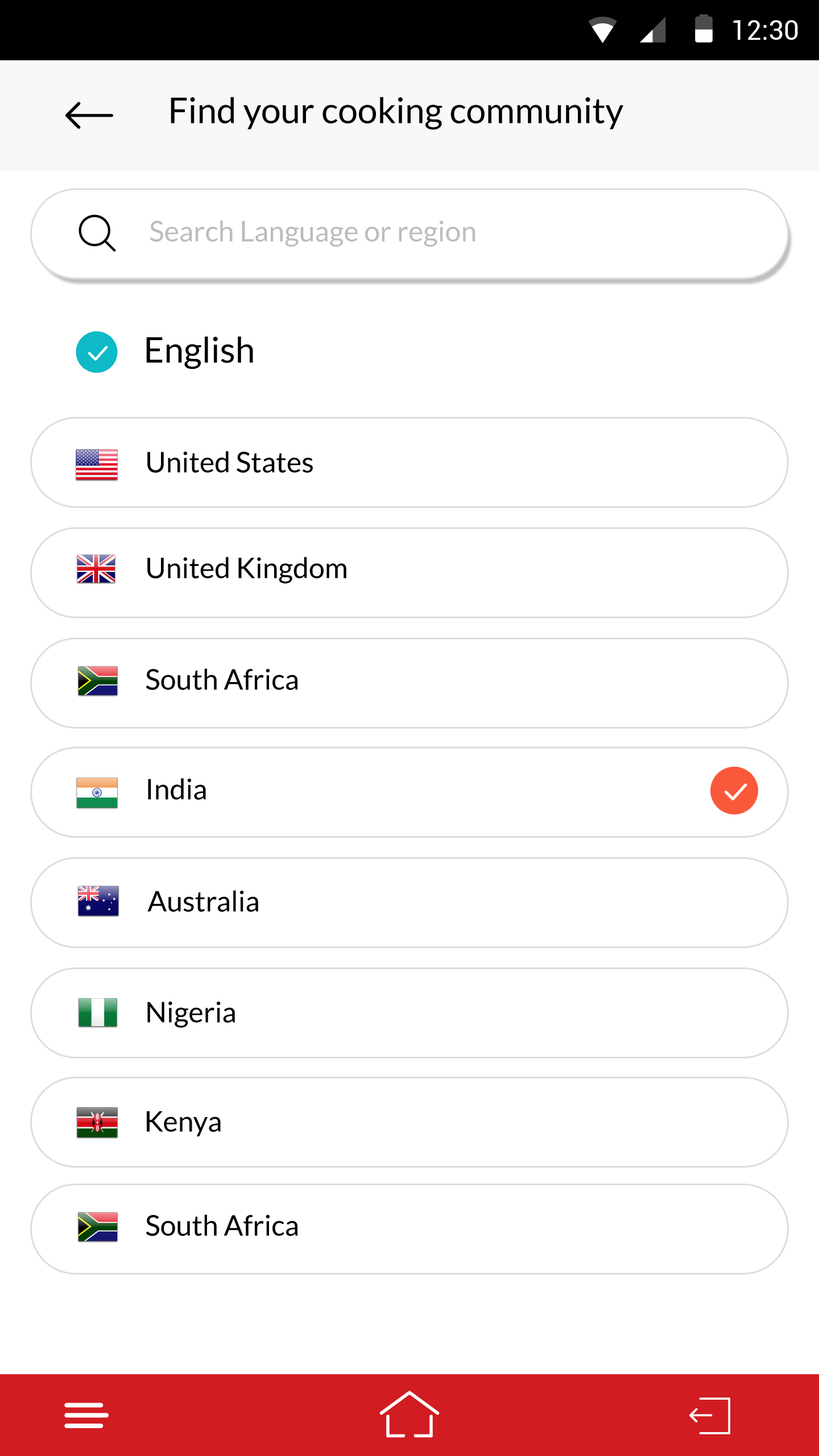
<style>
.page{position:relative;width:819px;height:1456px;background:#ffffff}
.page>*{position:absolute;margin:0}
.t1{font:27.3px "Roboto-Regular";color:#ffffff}
.t2{font:35.4px "Lato-Regular";color:#000000}
.t3{font:28.4px "Lato-Regular";color:#bcbcbc}
.t4{font:28.4px "Lato-Regular";color:#000000}
</style>
<div class="page">
<p class="t1" style="left:733px;top:20px;width:65px;height:20px">12:30</p>
<p class="t2" style="left:171px;top:97px;width:452px;height:33px">Find your cooking community</p>
<p class="t3" style="left:150px;top:220px;width:325px;height:27px">Search Language or region</p>
<p class="t2" style="left:146px;top:336px;width:107px;height:33px">English</p>
<p class="t4" style="left:147px;top:451px;width:166px;height:22px">United States</p>
<p class="t4" style="left:147px;top:557px;width:199px;height:27px">United Kingdom</p>
<p class="t4" style="left:146px;top:668px;width:151px;height:22px">South Africa</p>
<p class="t4" style="left:148px;top:778px;width:58px;height:22px">India</p>
<p class="t4" style="left:147px;top:890px;width:111px;height:22px">Australia</p>
<p class="t4" style="left:147px;top:1002px;width:88px;height:26px">Nigeria</p>
<p class="t4" style="left:147px;top:1111px;width:74px;height:25px">Kenya</p>
<p class="t4" style="left:146px;top:1214px;width:151px;height:22px">South Africa</p>
</div>
